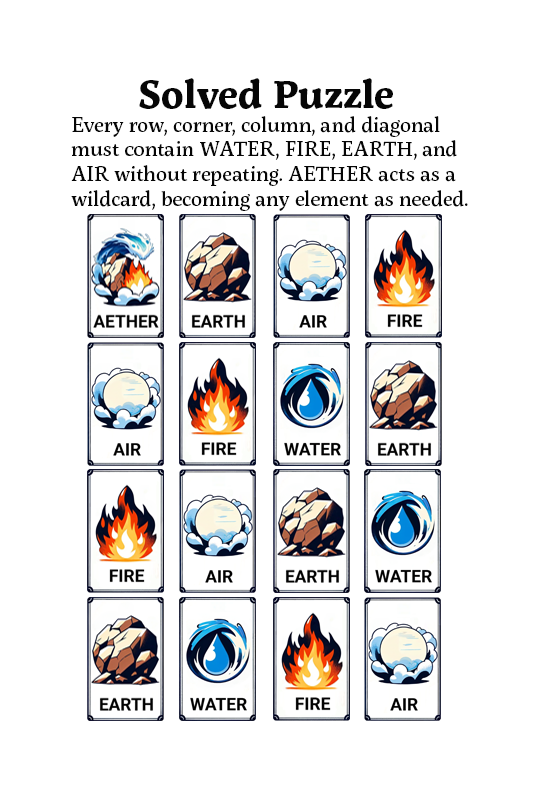
<style>
.page{position:relative;width:534px;height:785px;background:#ffffff}
.page>*{position:absolute;margin:0}
.t1{font:39px "ServusSlab-Bold";color:#060606}
.t2{font:20.6px "ServusSlab-Medium";color:#060606}
</style>
<div class="page">
<p class="t1" style="left:139px;top:78px;width:254px;height:31px">Solved Puzzle</p>
<p class="t2" style="left:71px;top:116px;width:397px;height:95px">Every row, corner, column, and diagonal must contain WATER, FIRE, EARTH, and AIR without repeating. AETHER acts as a wildcard, becoming any element as needed.</p>
</div>
